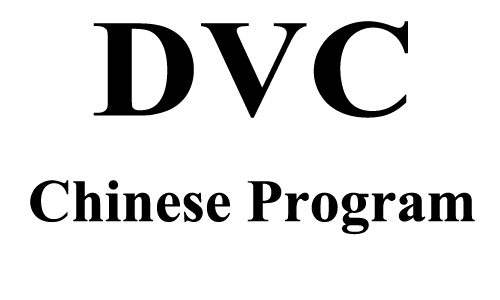
<style>
.page{position:relative;width:500px;height:300px;background:#ffffff}
.page>*{position:absolute;margin:0}
.t1{font:138.9px "TimesNewRomanPS-BoldMT";color:#000000;scale:1.08 1}
.t2{font:60px "TimesNewRomanPS-BoldMT";color:#000000}
</style>
<div class="page">
<p class="t1" style="left:93px;top:21px;width:315px;height:97px">DVC</p>
<p class="t2" style="left:30px;top:180px;width:445px;height:55px">Chinese Program</p>
</div>
